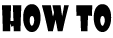
<style>
.page{position:relative;width:113px;height:38px;background:#ffffff}
.page>*{position:absolute;margin:0}
.t1{font:34.3px "ShowcardGothic-Reg";letter-spacing:0.04em;color:#000000;scale:0.76 1}
</style>
<div class="page">
<p class="t1" style="left:2px;top:4px;width:110px;height:28px">hOW TO</p>
</div>
